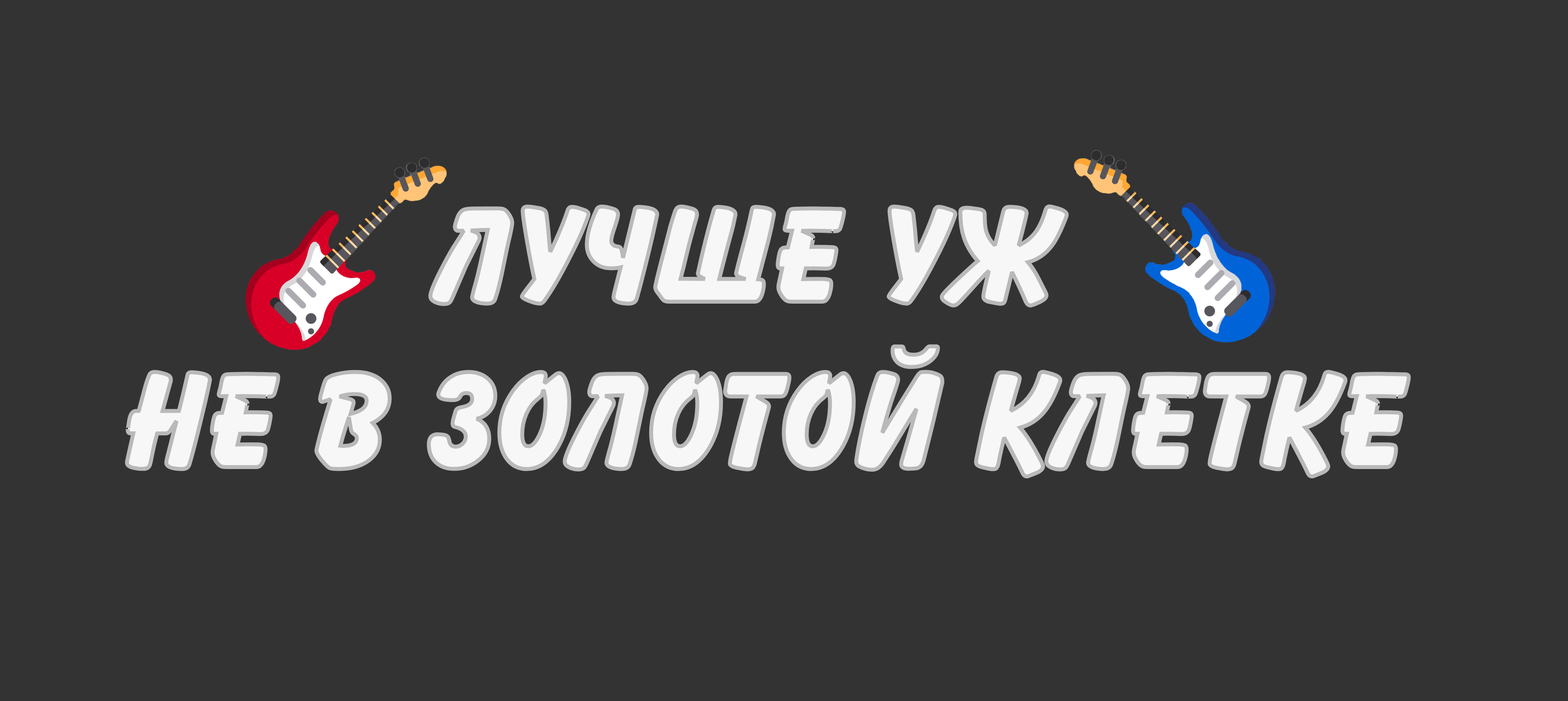
<style>
.page{position:relative;width:1568px;height:701px;background:#333333}
.page>*{position:absolute;margin:0}
.t1{font:137.9px "BalloonTL-ExtraBold";color:#f7f7f7}
</style>
<div class="page">
<p class="t1" style="left:125px;top:204px;width:1286px;height:275px;text-align:center">Лучше уж <br>не в золотой клетке</p>
</div>
